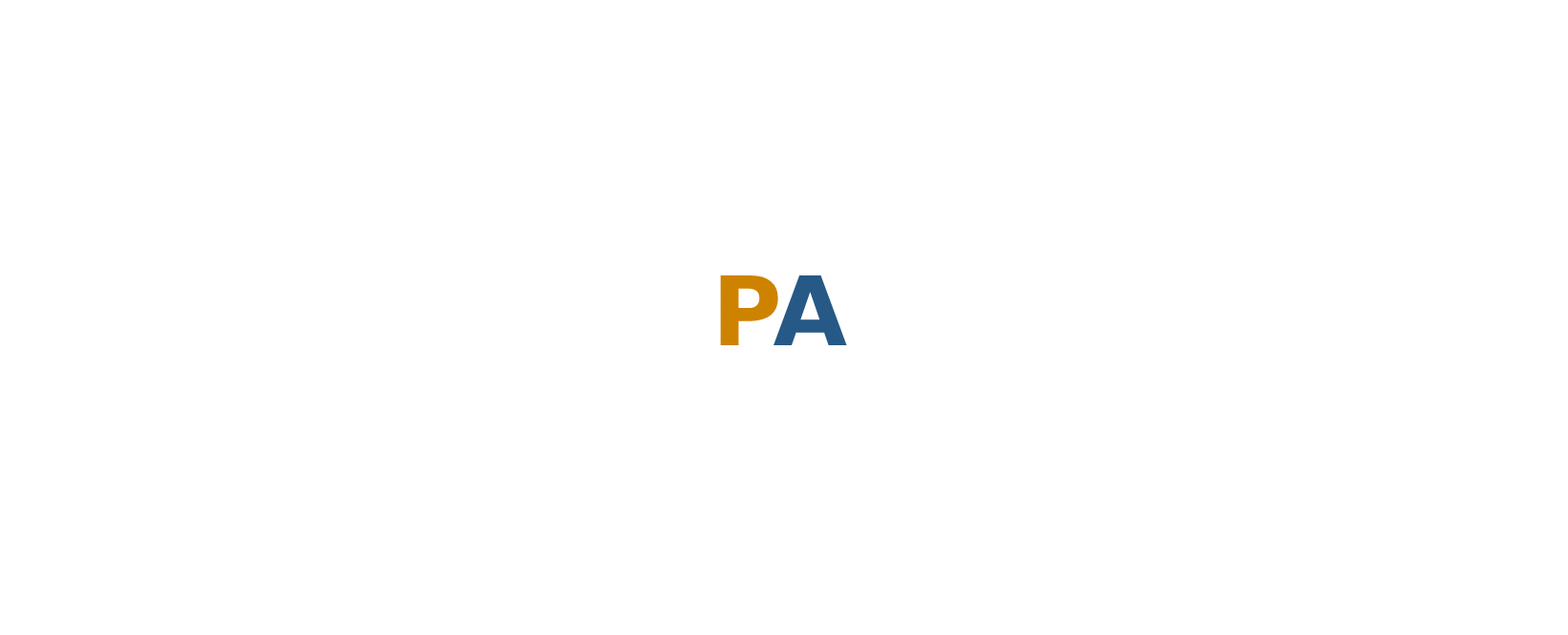
<style>
.page{position:relative;width:1568px;height:635px;background:#ffffff}
.page>*{position:absolute;margin:0}
.t1{font:95.6px "DejaVuSans-Bold";color:#ce8300}
.t2{font:95.6px "DejaVuSans-Bold";color:#265985}
</style>
<div class="page">
<p class="t1" style="left:720px;top:275px;width:127px;height:70px">P<span class="t2">A</span></p>
</div>
